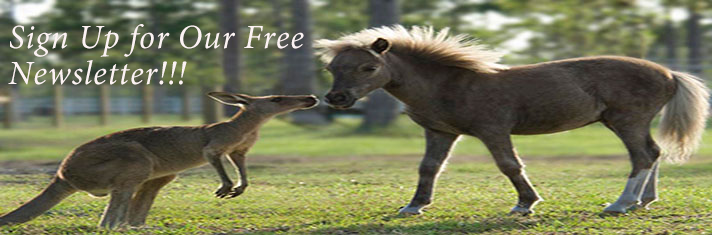
<style>
.page{position:relative;width:712px;height:235px}
.page>*{position:absolute;margin:0}
.t1{font:34px/36px "MinionPro-It";letter-spacing:0.025em;color:#fcf3f3}
</style>
<div class="page">
<p class="t1" style="left:8px;top:24px;width:296px;height:61px">Sign Up for Our Free<br>Newsletter!!!</p>
</div>
